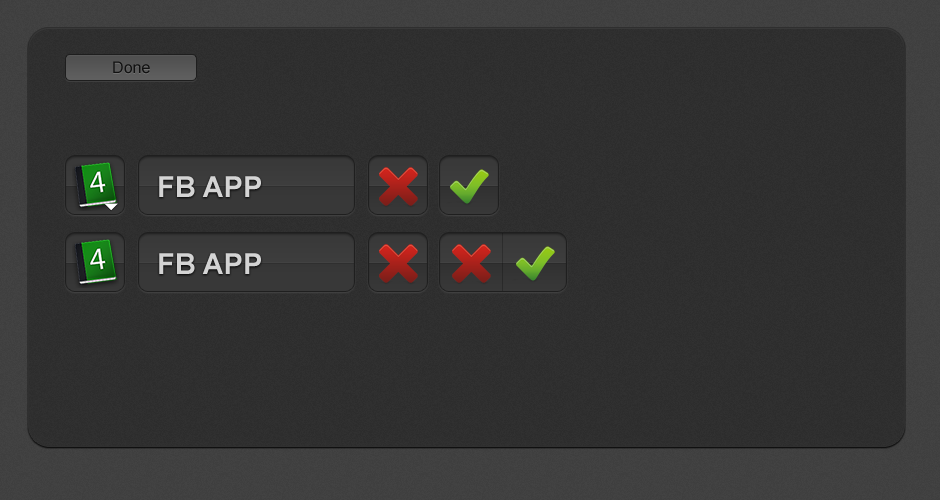
<style>
.page{position:relative;width:940px;height:500px}
.page>*{position:absolute;margin:0}
.t1{font:16px "ArialMT";letter-spacing:0.005em;color:#121212}
.t2{font:29px "Arial-BoldMT";color:#d4d4d4;text-transform:uppercase}
</style>
<div class="page">
<p class="t1" style="left:113px;top:61px;width:37px;height:13px">Done</p>
<p class="t2" style="left:159px;top:176px;width:102px;height:21px">FB App</p>
<p class="t2" style="left:159px;top:253px;width:102px;height:21px">FB App</p>
</div>
